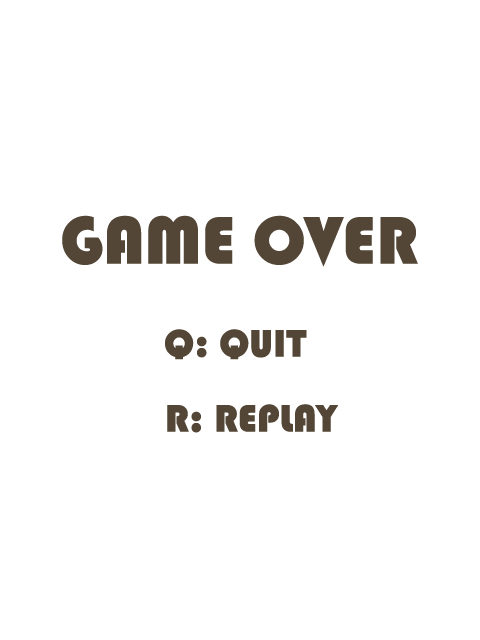
<style>
.page{position:relative;width:480px;height:640px;background:#ffffff}
.page>*{position:absolute;margin:0}
.t1{font:70px "Bauhaus93";color:#534637}
.t2{font:40px "Bauhaus93";color:#534637}
</style>
<div class="page">
<p class="t1" style="left:62px;top:215px;width:356px;height:52px">GAME OVER</p>
<p class="t2" style="left:165px;top:329px;width:142px;height:31px">Q: QUIT</p>
<p class="t2" style="left:167px;top:404px;width:172px;height:29px">R: REPLAY</p>
</div>
